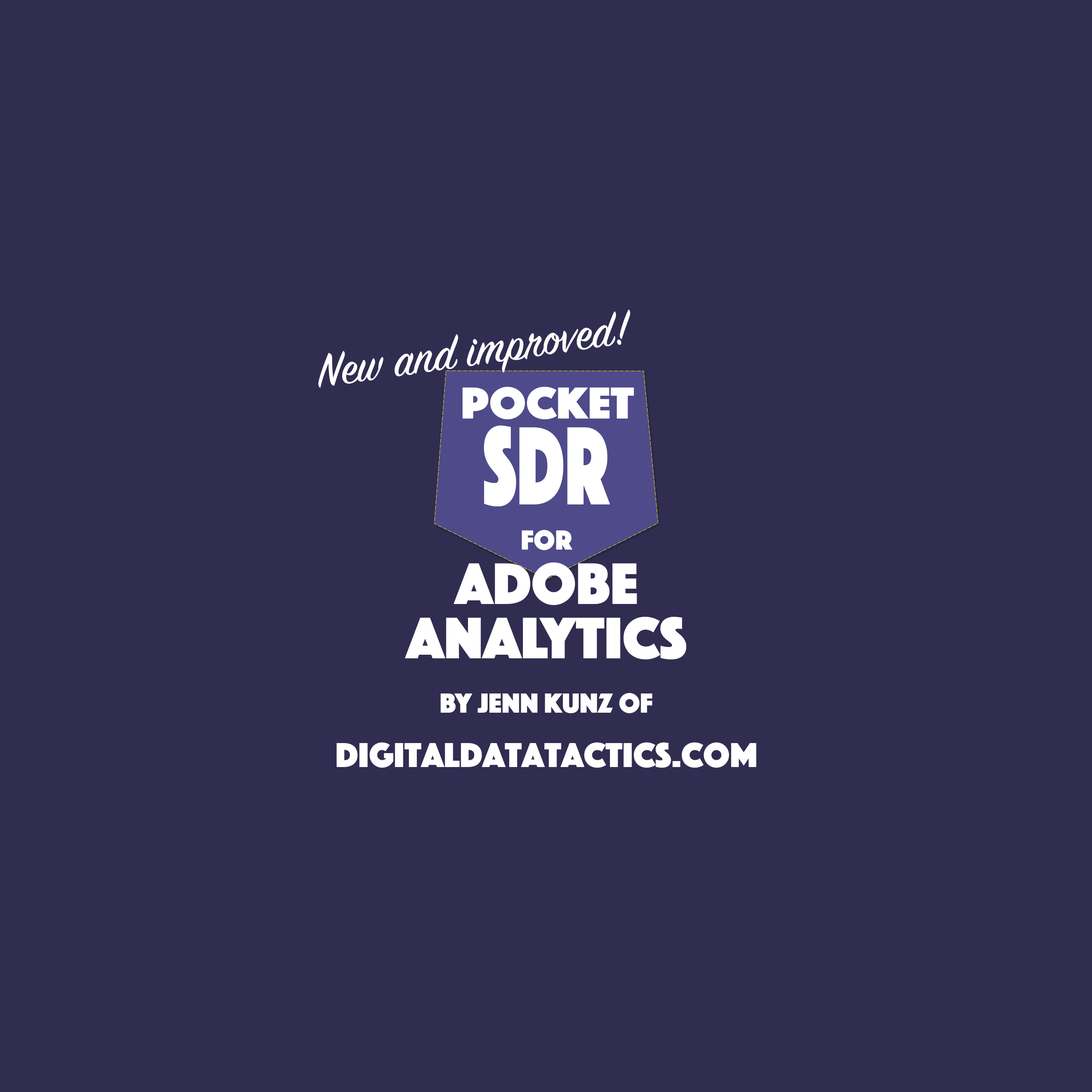
<style>
.page{position:relative;width:1092px;height:1092px;background:#302d51}
.page>*{position:absolute;margin:0}
.t1{font:52px "SignPainter-HouseScript";color:#ffffff}
.t2{font:46.2px "Phosphate-Solid";color:#ffffff;scale:1.07 1}
.t3{font:115.5px "Phosphate-Solid";color:#ffffff;scale:0.65 1}
.t4{font:36px/54.4px "Phosphate-Solid";color:#ffffff}
.t5{font:28.8px/28.8px "Phosphate-Solid";color:#ffffff}
.t6{font:60.7px/54.4px "Phosphate-Solid";color:#ffffff}
.t7{font:28.8px/54.4px "Phosphate-Solid";color:#ffffff}
</style>
<div class="page">
<p class="t1" style="left:318px;top:309px;width:312px;height:79px;rotate:-8deg">New and improved!</p>
<p class="t2" style="left:462px;top:387px;width:172px;height:32px">Pocket</p>
<p class="t3" style="left:484px;top:425px;width:126px;height:81px">SDR</p>
<p class="t4" style="left:337px;top:530px;width:419px;height:238px;text-align:center"><span class="t5">FOR <br></span><span class="t6">Adobe <br>Analytics<br></span><span class="t7">BY JENN KUNZ of<br></span>DigitalDataTactics.com</p>
</div>
